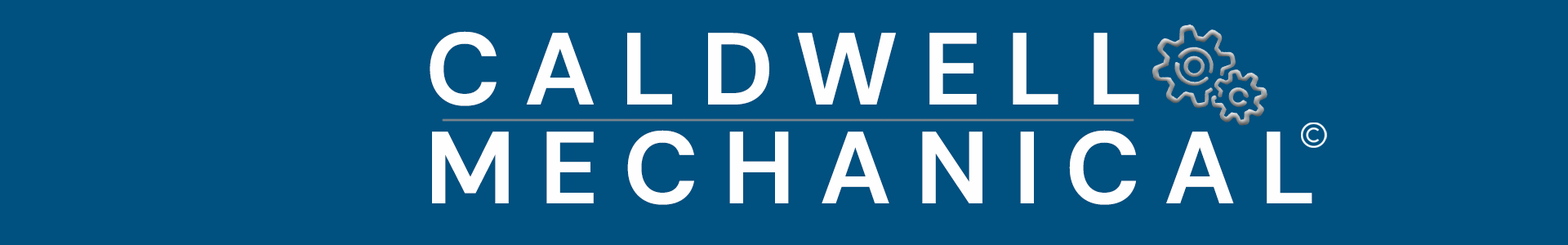
<style>
.page{position:relative;width:1568px;height:245px;background:#005080}
.page>*{position:absolute;margin:0}
.t1{font:102.1px "DMSans-Bold";letter-spacing:0.24em;color:#fefefe;text-transform:uppercase}
</style>
<div class="page">
<p class="t1" style="left:430px;top:31px;width:709px;height:75px">Caldwell</p>
<p class="t1" style="left:432px;top:130px;width:880px;height:75px">Mechanical</p>
</div>
